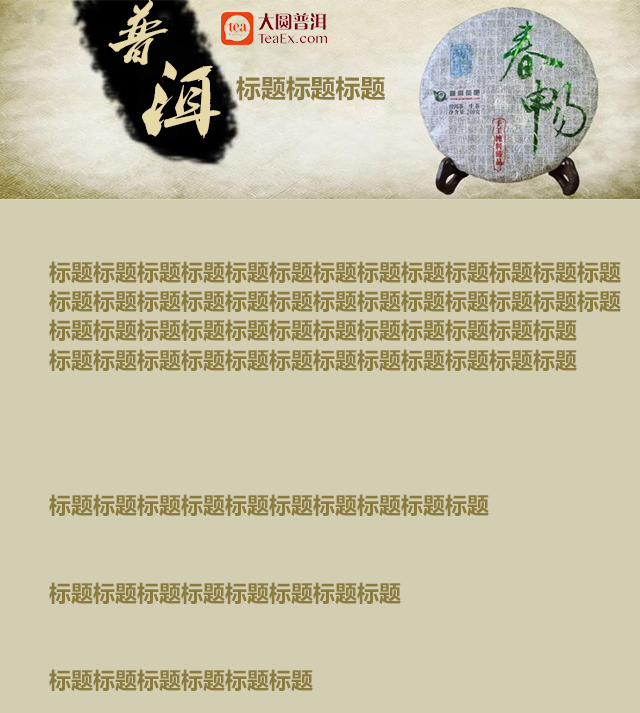
<style>
.page{position:relative;width:640px;height:713px;background:#d3ceb1}
.page>*{position:absolute;margin:0}
.t1{font:67.6px "--";color:#e7d9a7}
.t2{font:84.3px "--";color:#e7d9a7}
.t3{font:25px "MicrosoftYaHei-Bold";color:#8c7b3f}
.t4{font:22.3px/29.2px "MicrosoftYaHei-Bold";color:#8c7b3f}
</style>
<div class="page">
<p class="t1" style="left:108px;top:0px;width:61px;height:65px">普</p>
<p class="t2" style="left:142px;top:61px;width:79px;height:78px">洱</p>
<p class="t3" style="left:236px;top:76px;width:150px;height:25px">标题标题标题</p>
<p class="t4" style="left:49px;top:261px;width:572px;height:431px">标题标题标题标题标题标题标题标题标题标题标题标题标题<br>标题标题标题标题标题标题标题标题标题标题标题标题标题<br>标题标题标题标题标题标题标题标题标题标题标题标题<br>标题标题标题标题标题标题标题标题标题标题标题标题<br><br><br><br><br>标题标题标题标题标题标题标题标题标题标题<br><br><br>标题标题标题标题标题标题标题标题<br><br><br>标题标题标题标题标题标题</p>
</div>
